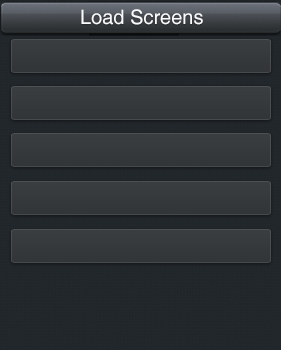
<style>
.page{position:relative;width:281px;height:350px}
.page>*{position:absolute;margin:0}
.t1{font:20px "Helvetica";color:#f9fafc}
</style>
<div class="page">
<p class="t1" style="left:81px;top:9px;width:122px;height:16px">Load Screens</p>
</div>
